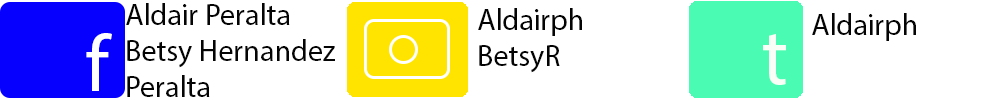
<style>
.page{position:relative;width:990px;height:100px;background:#ffffff}
.page>*{position:absolute;margin:0}
.t1{font:30px "MyriadPro-Regular";color:#040404}
.t2{font:80px "MyriadPro-Regular";color:#ffffff}
.t3{font:80px "MyriadPro-Regular";color:#f9fef7}
</style>
<div class="page">
<p class="t1" style="left:126px;top:3px;width:209px;height:94px">Aldair Peralta<br>Betsy Hernandez<br>Peralta</p>
<p class="t1" style="left:478px;top:8px;width:104px;height:65px">Aldairph<br>BetsyR</p>
<p class="t1" style="left:812px;top:13px;width:104px;height:28px">Aldairph</p>
<p class="t2" style="left:86px;top:33px;width:26px;height:58px">f</p>
<p class="t3" style="left:763px;top:34px;width:23px;height:51px">t</p>
</div>
